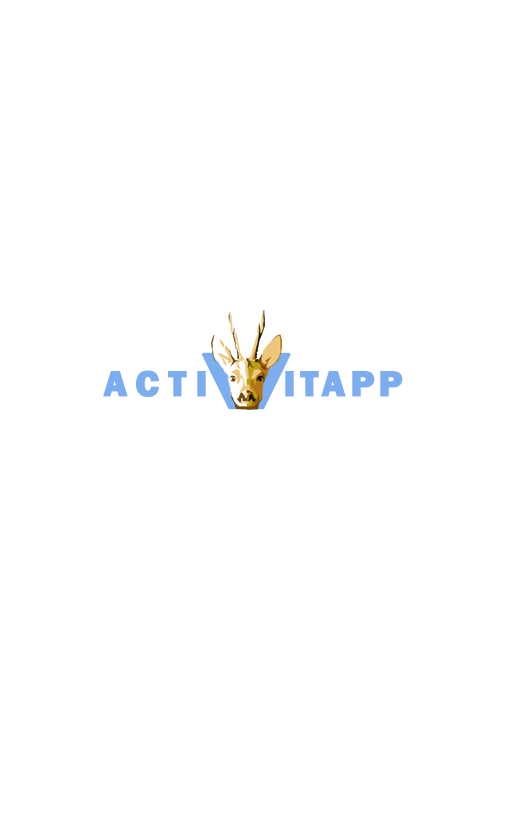
<style>
.page{position:relative;width:512px;height:820px;background:#ffffff}
.page>*{position:absolute;margin:0}
.t1{font:37.4px "FranklinGothic-Heavy";letter-spacing:0.22em;color:#7badef;text-transform:uppercase;font-weight:bold}
.t2{font:37.4px "FranklinGothic-Heavy";letter-spacing:0.1em;color:#7badef;text-transform:uppercase;font-weight:bold}
</style>
<div class="page">
<p class="t1" style="left:103px;top:370px;width:103px;height:27px">acti</p>
<p class="t2" style="left:285px;top:371px;width:118px;height:26px">itapp</p>
</div>
